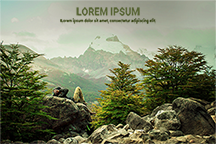
<style>
.page{position:relative;width:216px;height:144px}
.page>*{position:absolute;margin:0}
.t1{font:9.5px "Roboto-Bold";color:#546130}
.t2{font:3.8px "Roboto-Bold";color:#2d3b09}
</style>
<div class="page">
<p class="t1" style="left:76px;top:7px;width:64px;height:9px">LOREM IPSUM</p>
<p class="t2" style="left:60px;top:18px;width:96px;height:6px">Lorem ipsum dolor sit amet, consectetur adipiscing elit</p>
</div>
